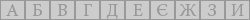
<style>
.page{position:relative;width:250px;height:20px;background:#cccccc}
.page>*{position:absolute;margin:0}
.t1{font:18px "MinionPro-Regular";color:#999999}
</style>
<div class="page">
<p class="t1" style="left:6px;top:4px;width:13px;height:12px">А</p>
<p class="t1" style="left:32px;top:4px;width:10px;height:12px">Б</p>
<p class="t1" style="left:57px;top:4px;width:10px;height:12px">В</p>
<p class="t1" style="left:83px;top:4px;width:9px;height:12px">Г</p>
<p class="t1" style="left:107px;top:4px;width:11px;height:15px">Д</p>
<p class="t1" style="left:133px;top:4px;width:10px;height:12px">Е</p>
<p class="t1" style="left:157px;top:4px;width:11px;height:12px">Є</p>
<p class="t1" style="left:179px;top:4px;width:18px;height:12px">Ж</p>
<p class="t1" style="left:207px;top:4px;width:10px;height:12px">З</p>
<p class="t1" style="left:231px;top:4px;width:13px;height:12px">И</p>
</div>
